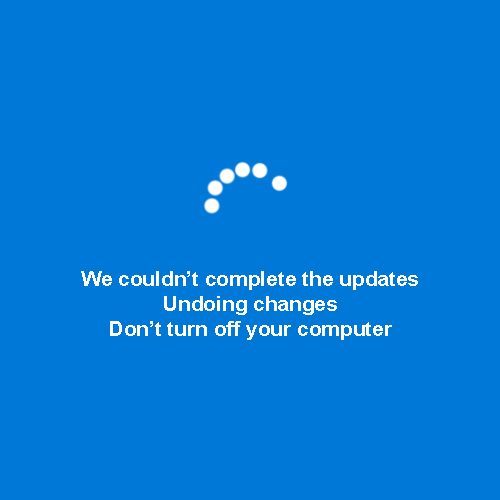
<style>
.page{position:relative;width:500px;height:500px;background:#0078d7}
.page>*{position:absolute;margin:0}
.t1{font:20.8px "Arial-BoldMT";color:#ffffff}
</style>
<div class="page">
<p class="t1" style="left:81px;top:271px;width:337px;height:69px;text-align:center">We couldn’t complete the updates<br>Undoing changes<br>Don’t turn off your computer</p>
</div>
